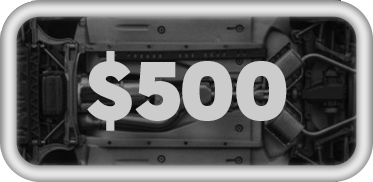
<style>
.page{position:relative;width:373px;height:182px}
.page>*{position:absolute;margin:0}
.t1{font:80.9px "Rotunda-Black";letter-spacing:-0.01em;color:#cccccc}
.t2{font:80.9px "Rotunda-Black";letter-spacing:0.025em;color:#cccccc}
</style>
<div class="page">
<p class="t1" style="left:87px;top:51px;width:200px;height:80px"><span class="t2">$</span>500</p>
</div>
